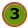
<style>
.page{position:relative;width:28px;height:28px;background:#ffffff}
.page>*{position:absolute;margin:0}
.t1{font:14.7px "Verdana-Bold";color:#000333}
</style>
<div class="page">
<p class="t1" style="left:10px;top:8px;width:9px;height:12px">3</p>
</div>
